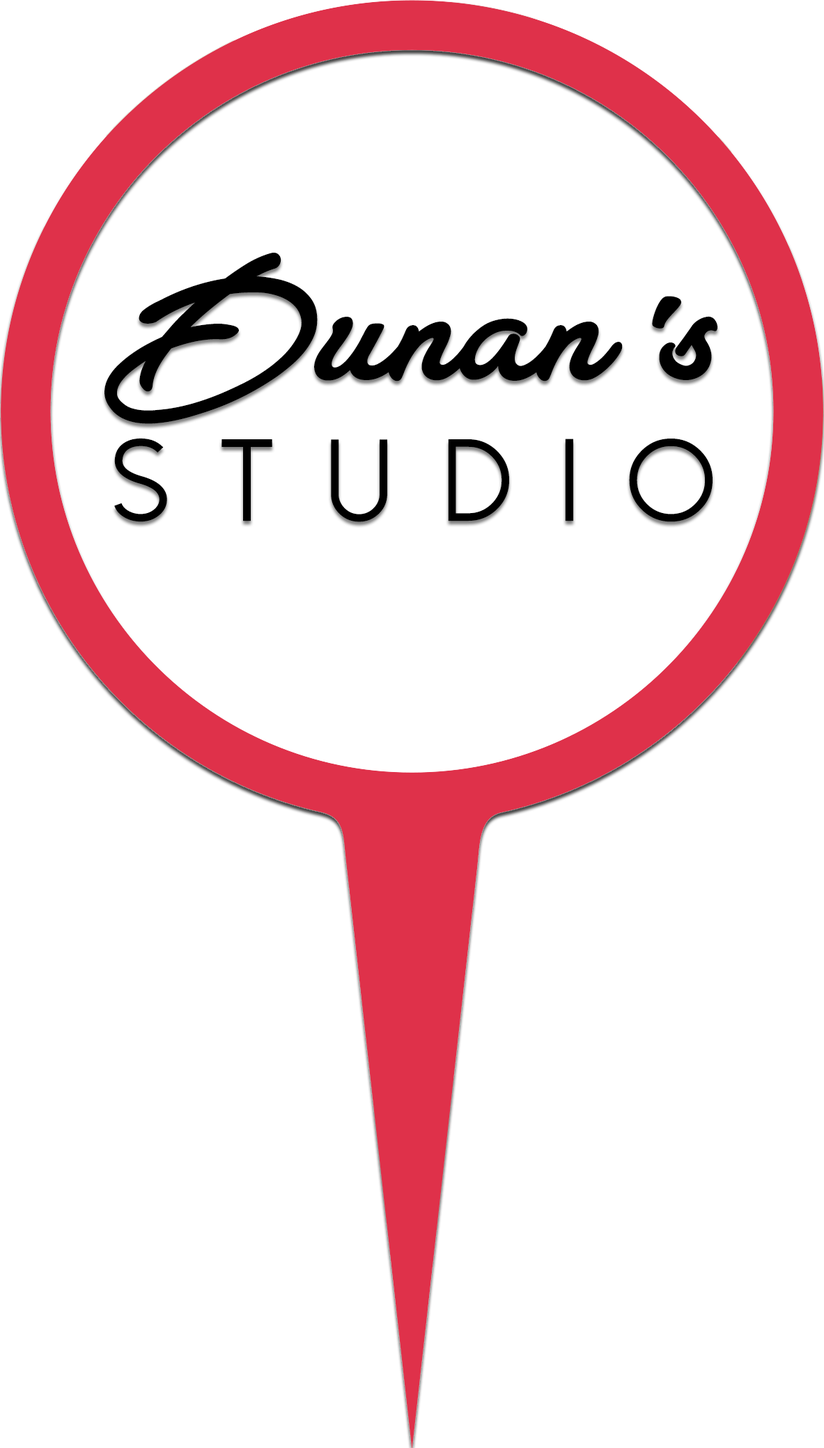
<style>
.page{position:relative;width:824px;height:1448px;background:#ffffff}
.page>*{position:absolute;margin:0}
.t1{font:179.8px "AtelasPersonalUseOnly";color:#000000}
.t2{font:116px "DolceVita";letter-spacing:0.452em;color:#000000}
</style>
<div class="page">
<p class="t1" style="left:104px;top:253px;width:613px;height:269px;text-align:center">Dunan’s<br><span class="t2">Studio</span></p>
</div>
